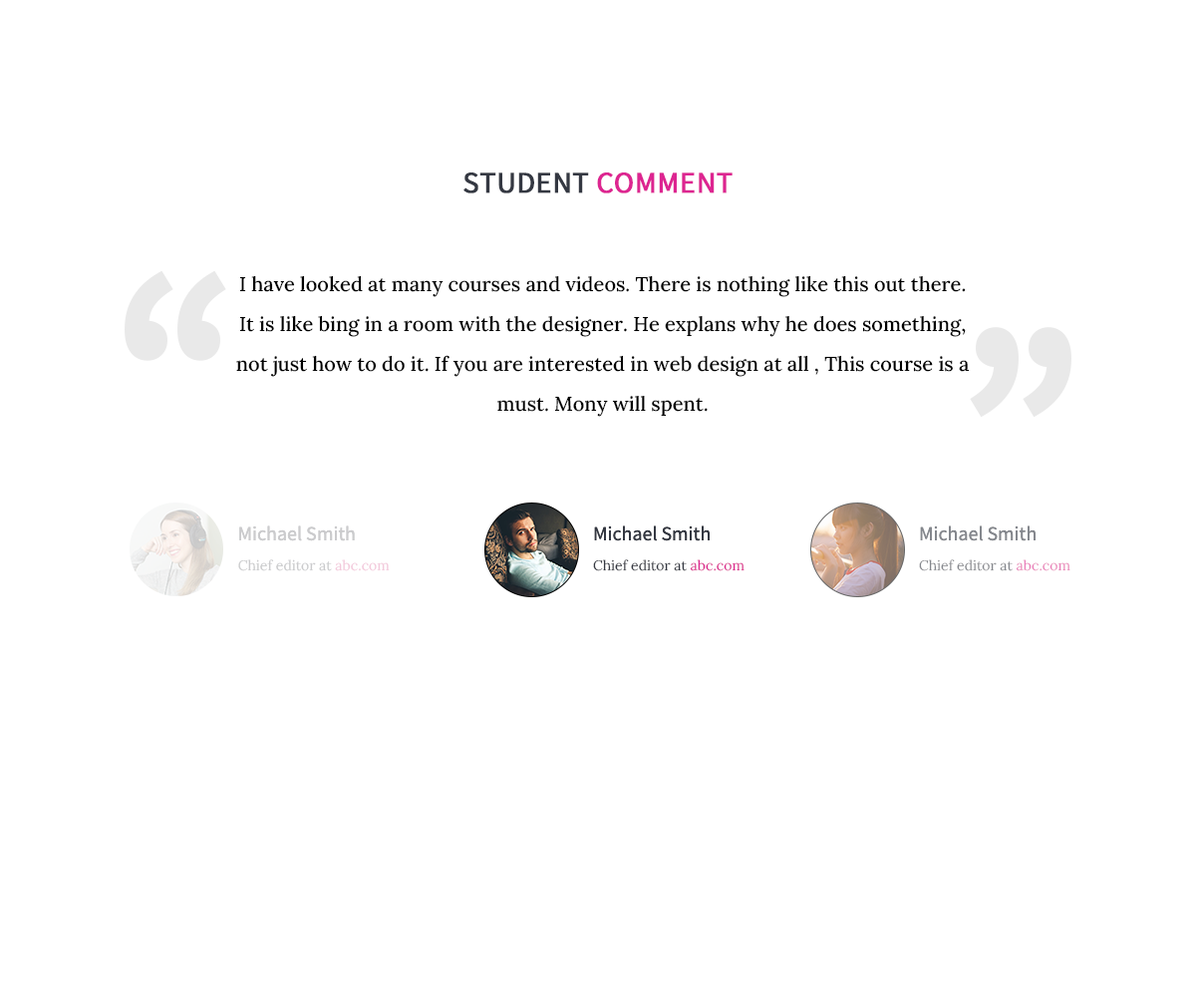
<style>
.page{position:relative;width:1196px;height:997px;background:#ffffff}
.page>*{position:absolute;margin:0}
.t1{font:29.9px "SourceSansPro-Regular";color:#343842;text-transform:uppercase;font-weight:bold}
.t2{font:29.9px "SourceSansPro-Regular";color:#dd2591;text-transform:uppercase;font-weight:bold}
.t3{font:299.1px "SourceSansPro-Regular";color:#e9e9e9;text-transform:uppercase;font-weight:bold}
.t4{font:19.9px/39.9px "LoraRoman-Medium";color:#000000}
.t5{font:14px/29.9px "Lora-Regular";color:#cbcbcd}
.t6{font:19.9px/29.9px "SourceSansPro-Regular";color:#cbcbcd}
.t7{font:14px/29.9px "Lora-Regular";color:#343842}
.t8{font:19.9px/29.9px "SourceSansPro-Regular";color:#343842}
.t9{font:14px/29.9px "Lora-Regular";color:#dd2591}
.t10{font:14px/29.9px "Lora-Regular";color:#85888e}
.t11{font:19.9px/29.9px "SourceSansPro-Regular";color:#85888e}
</style>
<div class="page">
<p class="t1" style="left:464px;top:172px;width:269px;height:21px">Student <span class="t2">Comment</span></p>
<p class="t3" style="left:125px;top:270px;width:101px;height:91px">“</p>
<p class="t4" style="left:236px;top:275px;width:734px;height:142px;text-align:center">I have looked at many courses and videos. There is nothing like this out there. It is like bing in a room with the designer. He explans why he does something, not just how to do it. If you are interested in web design at all , This course is a must. Mony will spent.</p>
<p class="t3" style="left:970px;top:327px;width:102px;height:91px">”</p>
<p class="t5" style="left:238px;top:525px;width:152px;height:46px"><span class="t6">Michael Smith<br></span>Chief editor at abc.com</p>
<p class="t7" style="left:593px;top:525px;width:152px;height:46px"><span class="t8">Michael Smith<br></span>Chief editor at <span class="t9">abc.com</span></p>
<p class="t10" style="left:919px;top:525px;width:152px;height:46px"><span class="t11">Michael Smith<br></span>Chief editor at abc.com</p>
</div>
